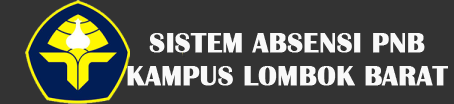
<style>
.page{position:relative;width:454px;height:104px;background:#333333}
.page>*{position:absolute;margin:0}
.t1{font:28.1px "BritannicBold";color:#f9f9f9;font-weight:bold}
</style>
<div class="page">
<p class="t1" style="left:127px;top:33px;width:321px;height:53px;text-align:center">SISTEM ABSENSI PNB<br>KAMPUS LOMBOK BARAT</p>
</div>
